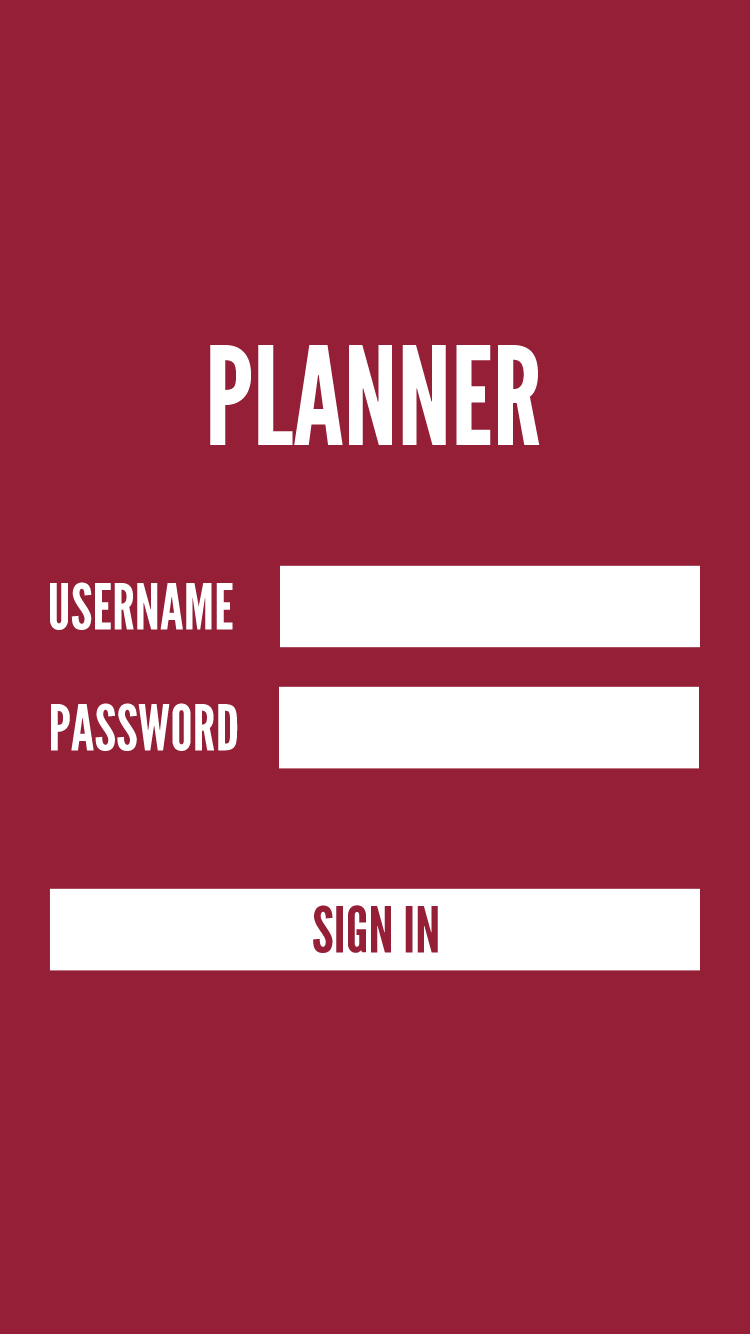
<style>
.page{position:relative;width:750px;height:1334px;background:#941f36}
.page>*{position:absolute;margin:0}
.t1{font:135.8px "LeagueGothic-Regular";color:#ffffff}
.t2{font:63.4px "LeagueGothic-Regular";color:#ffffff}
.t3{font:63.4px "LeagueGothic-Regular";color:#941f36}
</style>
<div class="page">
<p class="t1" style="left:210px;top:345px;width:330px;height:100px">PLANNER</p>
<p class="t2" style="left:50px;top:582px;width:183px;height:48px">USERNAME</p>
<p class="t2" style="left:51px;top:703px;width:187px;height:48px">PASSWORD</p>
<p class="t3" style="left:313px;top:905px;width:125px;height:48px">SIGN IN</p>
</div>
